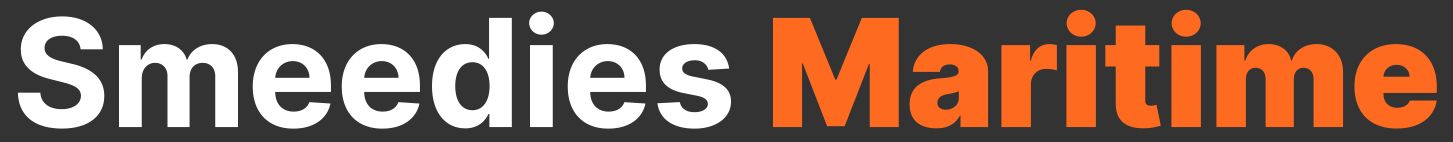
<style>
.page{position:relative;width:1453px;height:142px;background:#333333}
.page>*{position:absolute;margin:0}
.t1{font:150px "Inter-Bold";color:#ffffff}
.t2{font:150px "Inter-Black";color:#ff6a21}
</style>
<div class="page">
<p class="t1" style="left:17px;top:9px;width:1420px;height:120px">Smeedies <span class="t2">Maritime</span></p>
</div>
